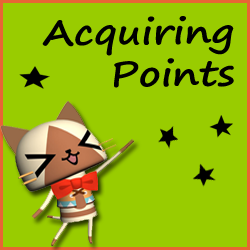
<style>
.page{position:relative;width:250px;height:250px;background:#99cc00}
.page>*{position:absolute;margin:0}
.t1{font:35px "SegoePrint-Bold";color:#000000;scale:1.14 1}
</style>
<div class="page">
<p class="t1" style="left:42px;top:16px;width:192px;height:72px;text-align:right;rotate:-1deg">Acquiring<br>Points</p>
</div>
